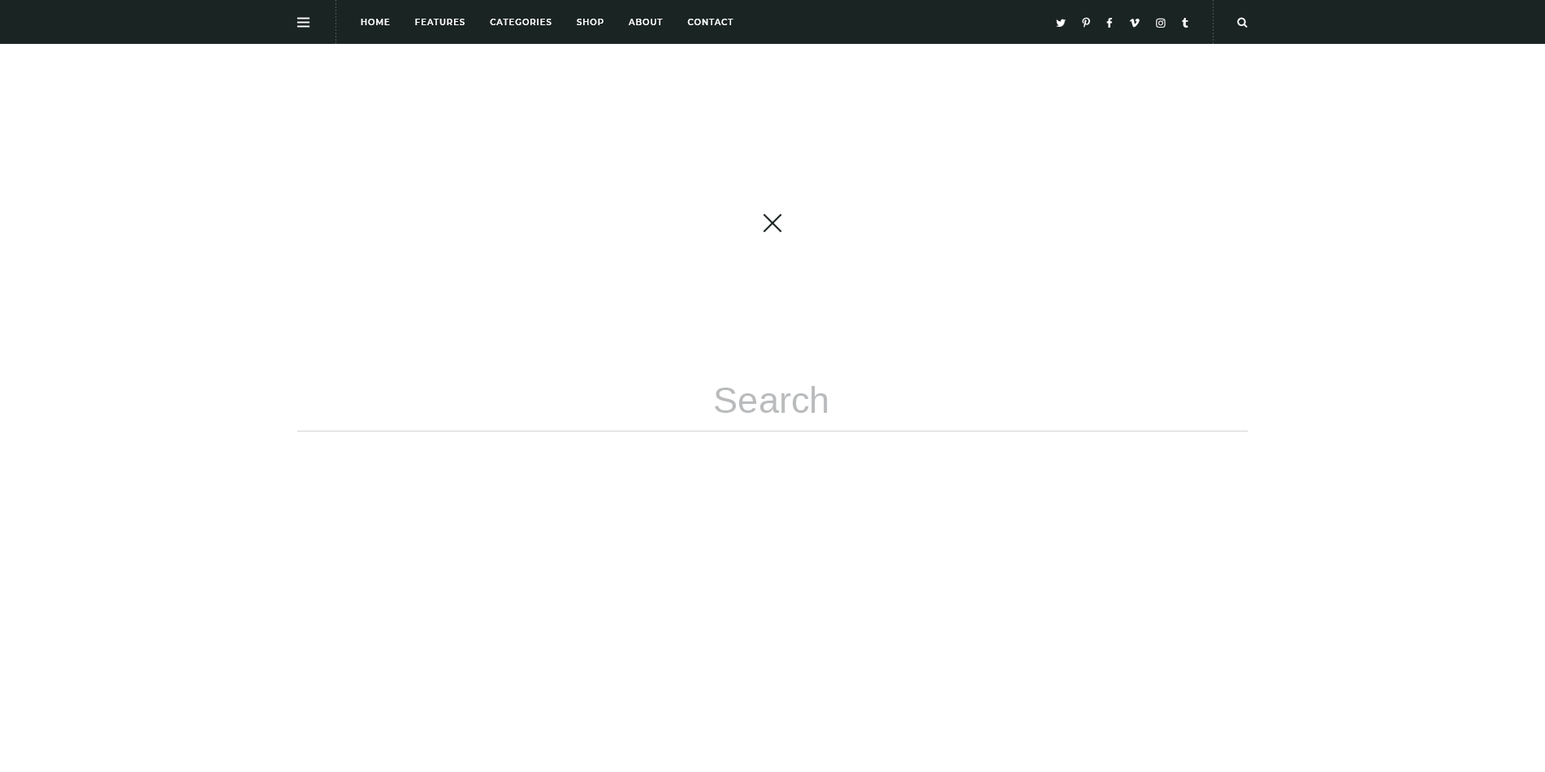
<style>
.page{position:relative;width:1545px;height:772px;background:#ffffff}
.page>*{position:absolute;margin:0}
.t1{font:8.1px "Montserrat-SemiBold";letter-spacing:0.1em;color:#ffffff;text-transform:uppercase}
.t2{font:36.6px "Arimo";color:#b9bbbd}
</style>
<div class="page">
<p class="t1" style="left:361px;top:19px;width:373px;height:6px">Home        Features        Categories        Shop        About        Contact</p>
<p class="t2" style="left:715px;top:386px;width:113px;height:27px">Search</p>
</div>
